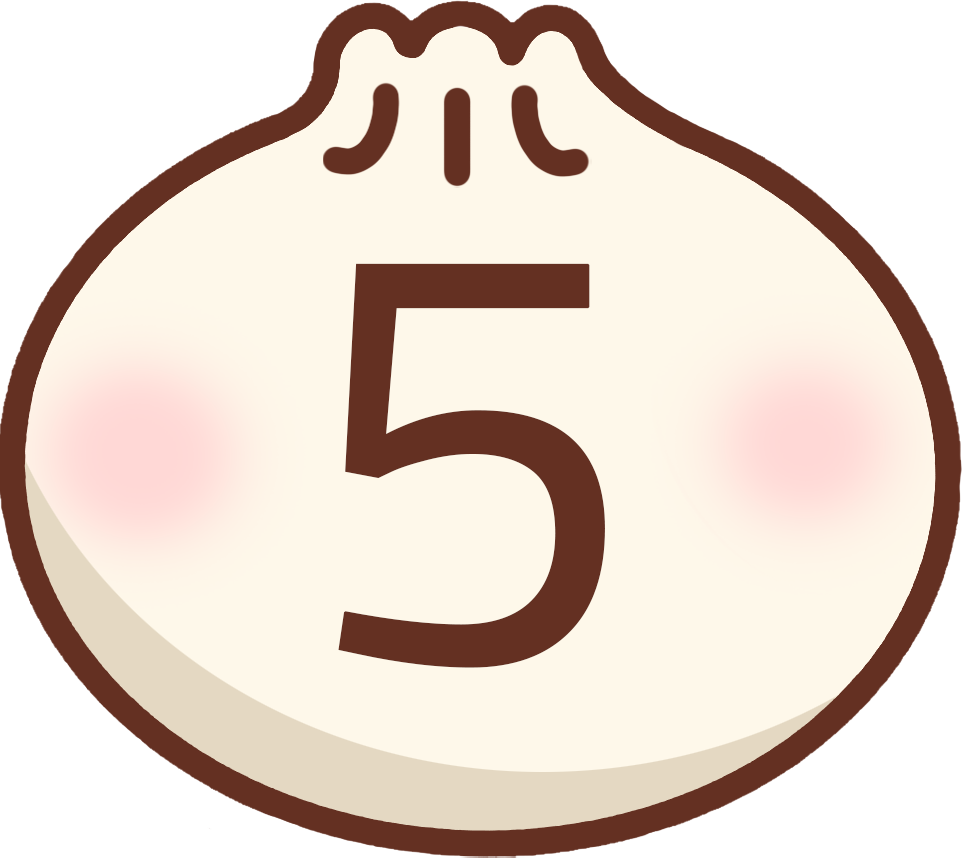
<style>
.page{position:relative;width:962px;height:858px;background:#fef8ea}
.page>*{position:absolute;margin:0}
.t1{font:600px "TitilliumWeb-Regular";letter-spacing:0.01em;color:#643022;font-weight:bold}
</style>
<div class="page">
<p class="t1" style="left:338px;top:263px;width:267px;height:405px">5</p>
</div>
